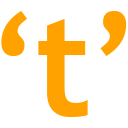
<style>
.page{position:relative;width:128px;height:128px;background:#ffffff}
.page>*{position:absolute;margin:0}
.t1{font:143px "TrebuchetMS-Bold";letter-spacing:-0.03em;color:#ffa200}
</style>
<div class="page">
<p class="t1" style="left:1px;top:11px;width:126px;height:106px">‘t’</p>
</div>
